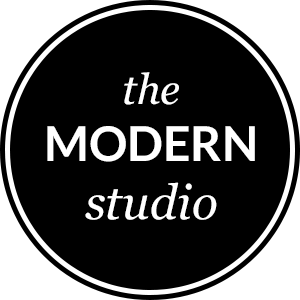
<style>
.page{position:relative;width:300px;height:300px;background:#000000}
.page>*{position:absolute;margin:0}
.t1{font:48px "Lato-Bold";color:#ffffff}
.t2{font:42px "Georgia-Italic";color:#ffffff}
.t3{font:48px "Georgia-Italic";color:#ffffff}
</style>
<div class="page">
<p class="t1" style="left:47px;top:72px;width:208px;height:148px;text-align:center"><span class="t2">the<br></span>MODERN<br><span class="t3">studio</span></p>
</div>
